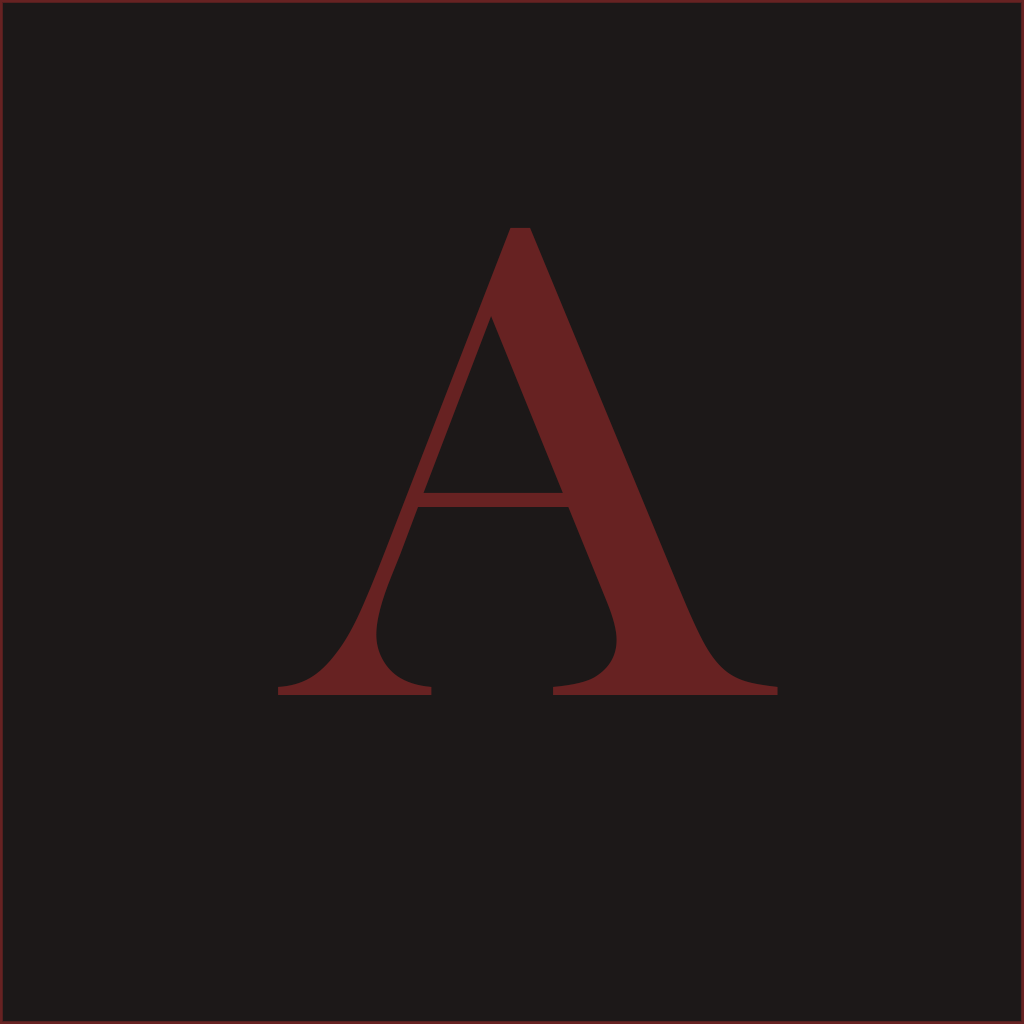
<style>
.page{position:relative;width:1024px;height:1024px;background:#1c1818}
.page>*{position:absolute;margin:0}
.t1{font:700px "BaskOldFace";color:#672222}
</style>
<div class="page">
<p class="t1" style="left:278px;top:227px;width:500px;height:468px">A</p>
</div>
